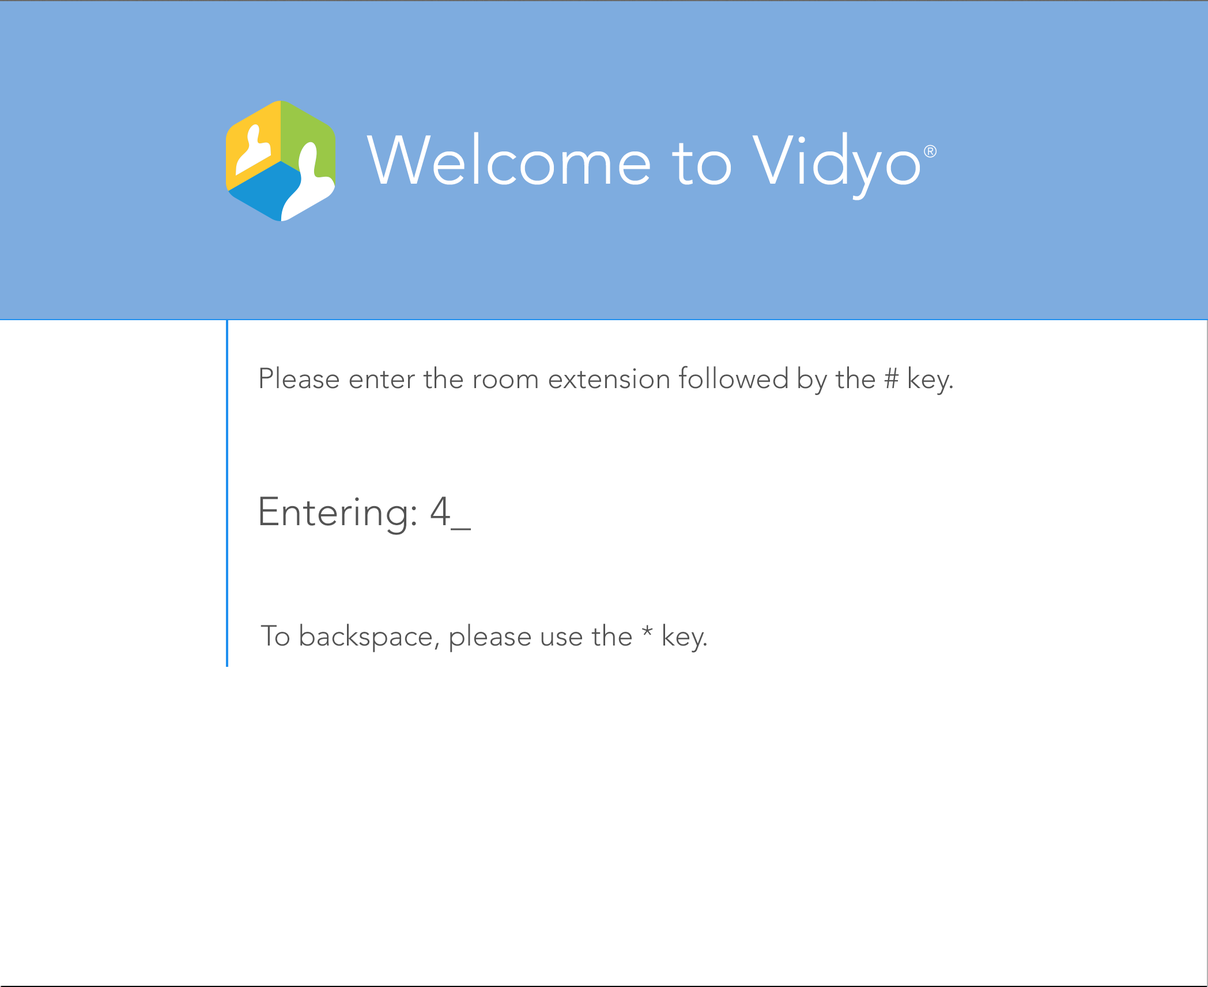
<style>
.page{position:relative;width:1208px;height:987px;background:#ffffff}
.page>*{position:absolute;margin:0}
.t1{font:68.2px "Avenir-Light";color:#ffffff}
.t2{font:28.8px "Avenir-Light";color:#ffffff}
.t3{font:28.8px "Avenir-Light";color:#535353}
.t4{font:40.3px "Avenir-Light";color:#535353}
</style>
<div class="page">
<p class="t1" style="left:366px;top:132px;width:570px;height:68px">Welcome to Vidyo<span class="t2">®</span></p>
<p class="t3" style="left:260px;top:366px;width:692px;height:29px">Please enter the room extension followed by the # key.</p>
<p class="t4" style="left:260px;top:497px;width:211px;height:38px">Entering: 4_</p>
<p class="t3" style="left:260px;top:624px;width:446px;height:29px">To backspace, please use the * key.</p>
</div>
